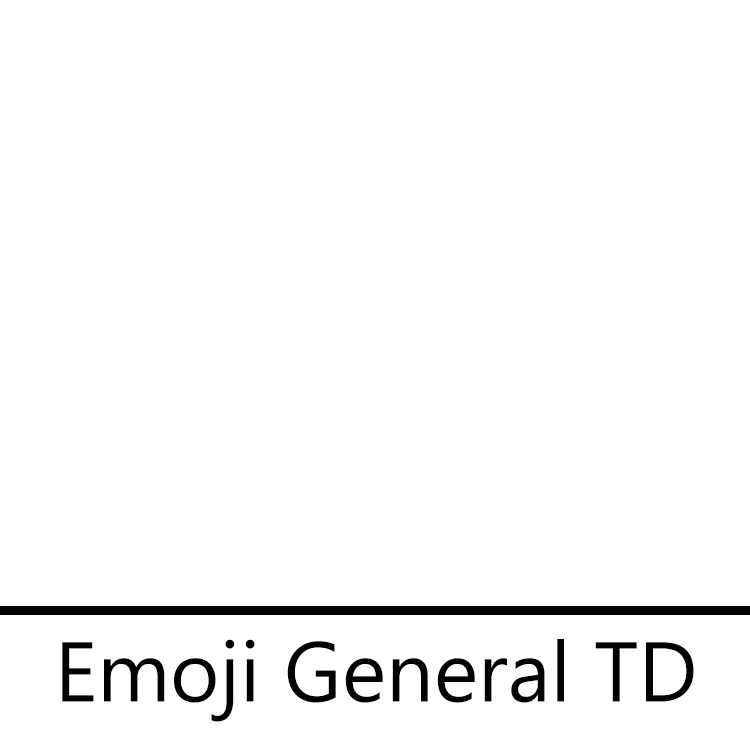
<style>
.page{position:relative;width:750px;height:750px;background:#ffffff}
.page>*{position:absolute;margin:0}
.t1{font:84.5px "SegoeUI";color:#000000}
</style>
<div class="page">
<p class="t1" style="left:62px;top:639px;width:632px;height:83px">Emoji General TD</p>
</div>
